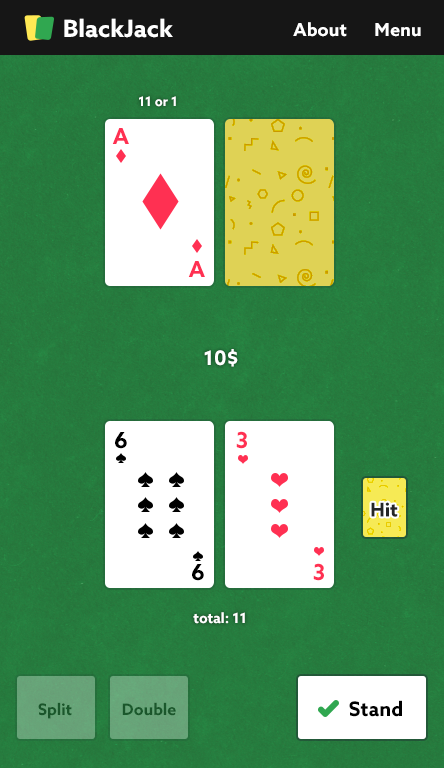
<style>
.page{position:relative;width:444px;height:768px}
.page>*{position:absolute;margin:0}
.t1{font:24px "AzoSans-Bold";color:#ffffff}
.t2{font:18px "AzoSans-Bold";color:#ffffff}
.t3{font:13px "AzoSans-Bold";color:#ffffff}
.t4{font:22px "AzoSans-Bold";color:#ff3052}
.t5{font:20px "AzoSans-Bold";color:#ffffff}
.t6{font:22px "AzoSans-Bold";color:#000000}
.t7{font:19px "AzoSans-Bold";color:#262626}
.t8{font:14px "AzoSans-Bold";color:#ffffff}
.t9{font:16px "AzoSans-Bold";color:#1b562b}
.t10{font:16px "AzoSans-Bold";color:#1b572c}
.t11{font:20px "AzoSans-Bold";color:#000000}
</style>
<div class="page">
<p class="t1" style="left:64px;top:18px;width:109px;height:20px">BlackJack</p>
<p class="t2" style="left:293px;top:22px;width:54px;height:15px">About</p>
<p class="t2" style="left:375px;top:23px;width:46px;height:14px">Menu</p>
<p class="t3" style="left:139px;top:96px;width:37px;height:11px">11 or 1</p>
<p class="t4" style="left:112px;top:128px;width:17px;height:16px">A</p>
<p class="t4" style="left:188px;top:261px;width:17px;height:16px">A</p>
<p class="t5" style="left:204px;top:349px;width:34px;height:18px">10$</p>
<p class="t6" style="left:115px;top:432px;width:12px;height:17px">6</p>
<p class="t4" style="left:236px;top:431px;width:11px;height:18px">3</p>
<p class="t7" style="left:371px;top:502px;width:27px;height:15px">Hit</p>
<p class="t6" style="left:192px;top:564px;width:12px;height:17px">6</p>
<p class="t4" style="left:313px;top:563px;width:11px;height:18px">3</p>
<p class="t8" style="left:193px;top:612px;width:52px;height:12px">total: 11</p>
<p class="t9" style="left:38px;top:702px;width:34px;height:17px">Split</p>
<p class="t10" style="left:122px;top:702px;width:54px;height:14px">Double</p>
<p class="t11" style="left:349px;top:700px;width:53px;height:17px">Stand</p>
</div>
